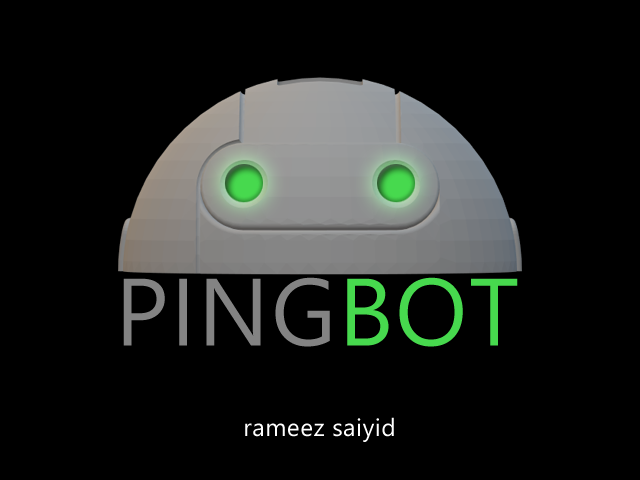
<style>
.page{position:relative;width:640px;height:480px;background:#000000}
.page>*{position:absolute;margin:0}
.t1{font:95.5px "SegoeUI";letter-spacing:0.02em;color:#838383}
.t2{font:95.5px "SegoeUI";letter-spacing:0.02em;color:#47d94e}
.t3{font:24.5px "SegoeUI";letter-spacing:0.02em;color:#ffffff}
</style>
<div class="page">
<p class="t1" style="left:123px;top:277px;width:395px;height:70px">PING<span class="t2">BOT</span></p>
<p class="t3" style="left:245px;top:417px;width:149px;height:25px">rameez saiyid</p>
</div>
